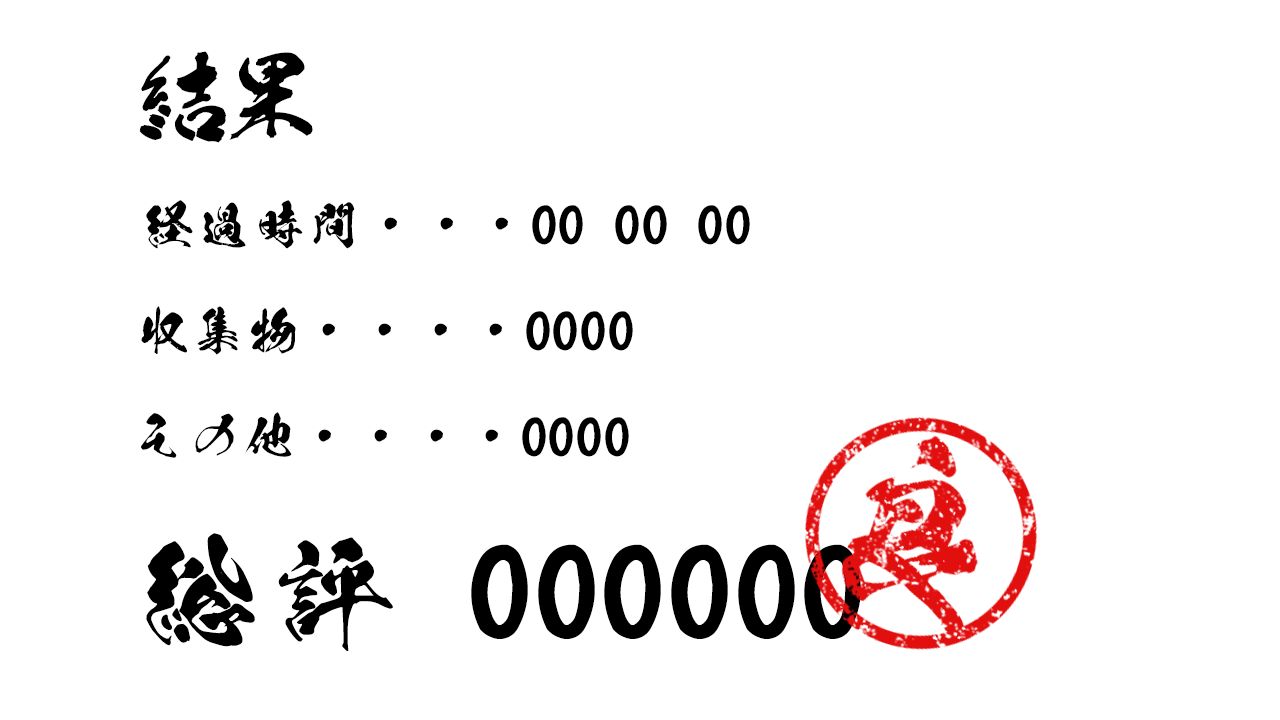
<style>
.page{position:relative;width:1280px;height:720px;background:#ffffff}
.page>*{position:absolute;margin:0}
.t1{font:88.9px "AB_ootori";color:#000000}
.t2{font:55.6px "KsoKokuryuSou";color:#000000}
.t3{font:133.3px "KsoKokuryuSou";color:#000000}
</style>
<div class="page">
<p class="t1" style="left:139px;top:51px;width:174px;height:92px">結果</p>
<p class="t2" style="left:146px;top:200px;width:604px;height:49px">経過時間・・・00 00 00</p>
<p class="t2" style="left:141px;top:306px;width:492px;height:49px">収集物・・・・0000</p>
<p class="t2" style="left:141px;top:412px;width:488px;height:46px">その他・・・・0000</p>
<p class="t3" style="left:146px;top:533px;width:715px;height:118px">総評 000000</p>
</div>
